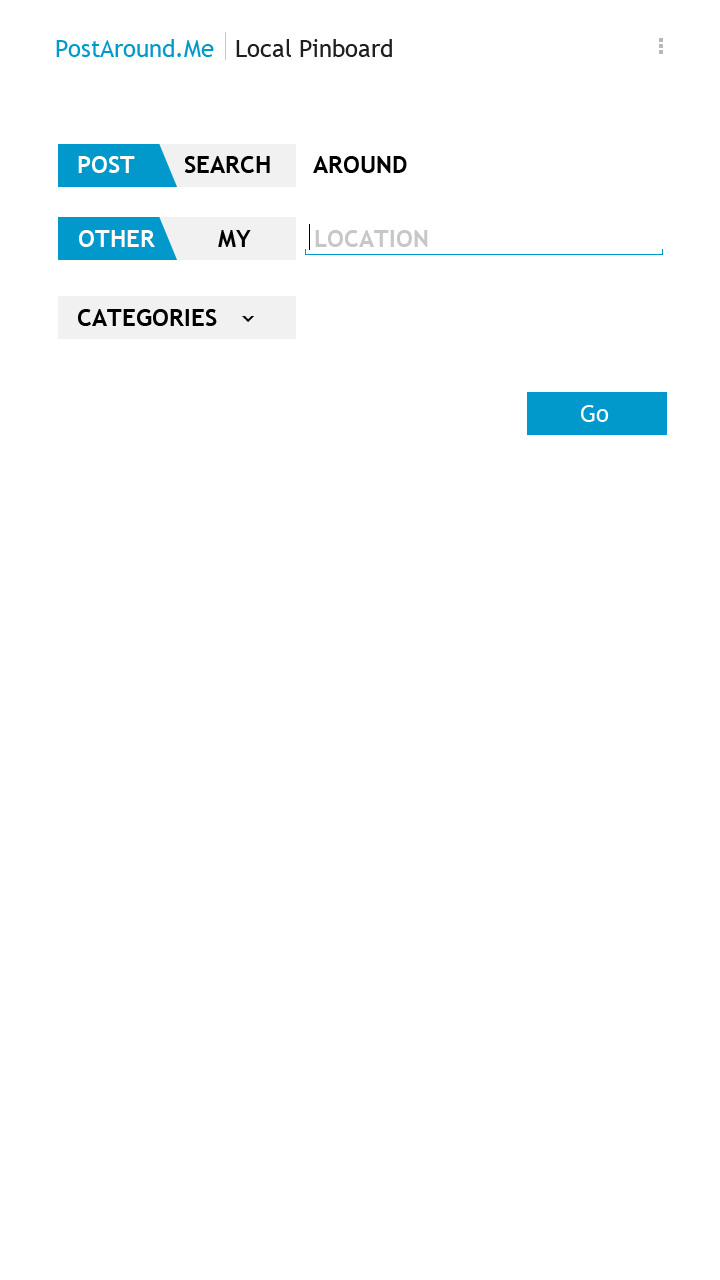
<style>
.page{position:relative;width:720px;height:1280px;background:#ffffff}
.page>*{position:absolute;margin:0}
.t1{font:24px "TrebuchetMS";color:#0199cc}
.t2{font:24px "TrebuchetMS";color:#1f1f1f}
.t3{font:24px "TrebuchetMS-Bold";color:#000000}
.t4{font:24px "TrebuchetMS-Bold";color:#ffffff}
.t5{font:24px "TrebuchetMS-Bold";color:#c7c7c7}
.t6{font:24px "TrebuchetMS";color:#ffffff}
</style>
<div class="page">
<p class="t1" style="left:56px;top:39px;width:158px;height:18px">PostAround.Me</p>
<p class="t2" style="left:236px;top:39px;width:156px;height:18px">Local Pinboard</p>
<p class="t3" style="left:78px;top:156px;width:329px;height:17px"><span class="t4">POST       </span>SEARCH      AROUND</p>
<p class="t5" style="left:79px;top:230px;width:349px;height:17px"><span class="t4">OTHER</span><span class="t3">         MY         </span>LOCATION</p>
<p class="t3" style="left:78px;top:309px;width:139px;height:17px">CATEGORIES</p>
<p class="t6" style="left:581px;top:405px;width:28px;height:17px">Go</p>
</div>
